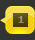
<style>
.page{position:relative;width:35px;height:40px;background:#333333}
.page>*{position:absolute;margin:0}
.t1{font:10px "Verdana-Bold";color:#9a9374}
</style>
<div class="page">
<p class="t1" style="left:18px;top:16px;width:6px;height:7px">1</p>
</div>
